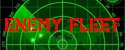
<style>
.page{position:relative;width:125px;height:50px}
.page>*{position:absolute;margin:0}
.t1{font:19px "PFStampsPro-Paint";color:#ff0000}
</style>
<div class="page">
<p class="t1" style="left:5px;top:16px;width:115px;height:20px">ENemy fleet</p>
</div>
